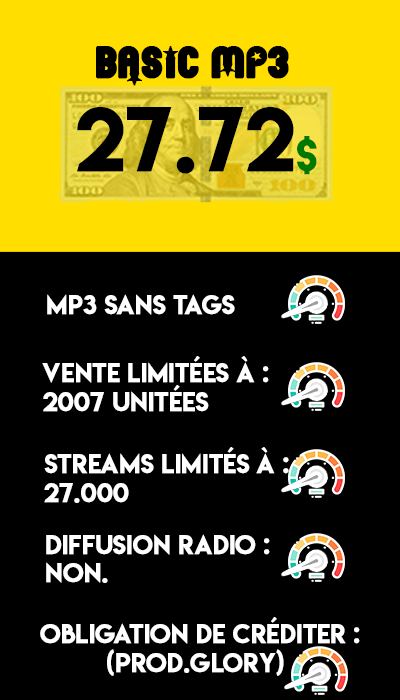
<style>
.page{position:relative;width:400px;height:700px;background:#000000}
.page>*{position:absolute;margin:0}
.t1{font:48px "Pornstar";color:#000000;text-transform:uppercase;font-weight:bold}
.t2{font:80.4px "LemonMilk";color:#000000;text-transform:uppercase;font-weight:bold}
.t3{font:40.2px "LemonMilk";color:#007903;text-transform:uppercase;font-weight:bold}
.t4{font:24px "LemonMilk";color:#ffffff;text-transform:uppercase;font-weight:bold}
</style>
<div class="page">
<p class="t1" style="left:96px;top:46px;width:193px;height:40px">basic mp3</p>
<p class="t2" style="left:77px;top:107px;width:240px;height:68px">27.72<span class="t3">$</span></p>
<p class="t4" style="left:47px;top:294px;width:188px;height:21px">mp3 sans tags</p>
<p class="t4" style="left:42px;top:356px;width:227px;height:56px">vente limitées à : <br>2007 unitées</p>
<p class="t4" style="left:44px;top:447px;width:245px;height:56px">streams limités à : <br>27.000</p>
<p class="t4" style="left:46px;top:534px;width:224px;height:49px">diffusion radio : <br>non.</p>
<p class="t4" style="left:40px;top:617px;width:320px;height:59px">obligation de créditer :<br>         (prod.glory)</p>
</div>
